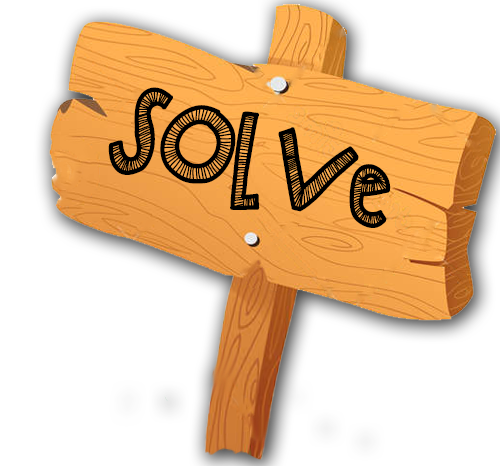
<style>
.page{position:relative;width:500px;height:466px;background:#ffffff}
.page>*{position:absolute;margin:0}
.t1{font:106.1px "KBZipaDeeDooDah";color:#000000;scale:0.94 1}
</style>
<div class="page">
<p class="t1" style="left:108px;top:87px;width:283px;height:141px;rotate:14deg">SOLVe</p>
</div>
